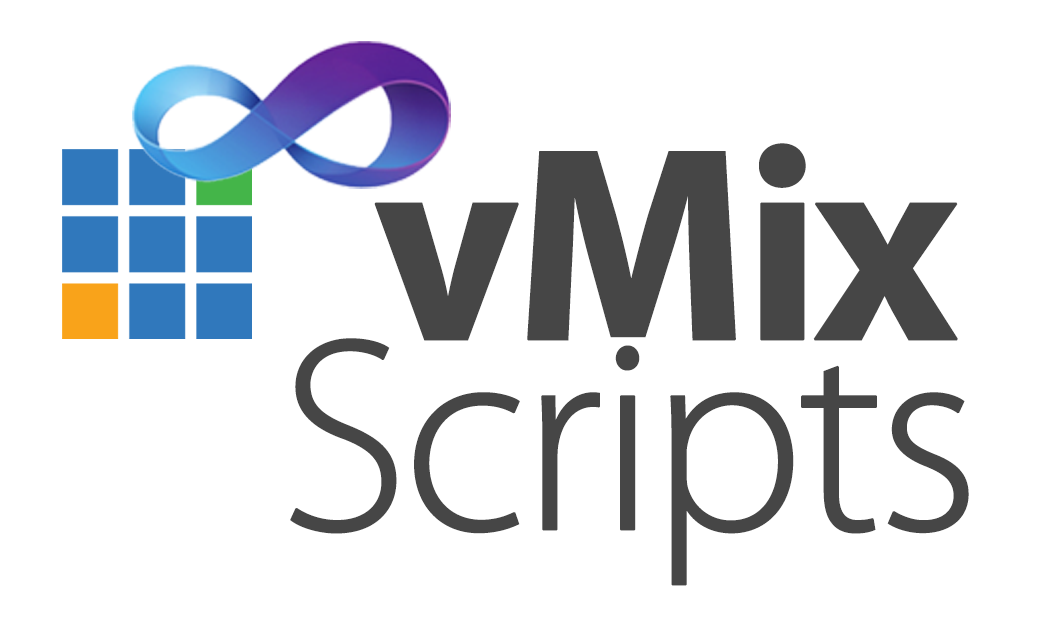
<style>
.page{position:relative;width:1040px;height:622px;background:#ffffff}
.page>*{position:absolute;margin:0}
.t1{font:277.8px "MyriadPro-Bold";letter-spacing:-0.05em;color:#464646;font-weight:bold}
.t2{font:277.8px "MyriadPro-Light";letter-spacing:-0.05em;color:#464646;font-weight:bold}
</style>
<div class="page">
<p class="t1" style="left:374px;top:143px;width:584px;height:198px">vMix</p>
<p class="t2" style="left:290px;top:338px;width:679px;height:248px">Scripts</p>
</div>
